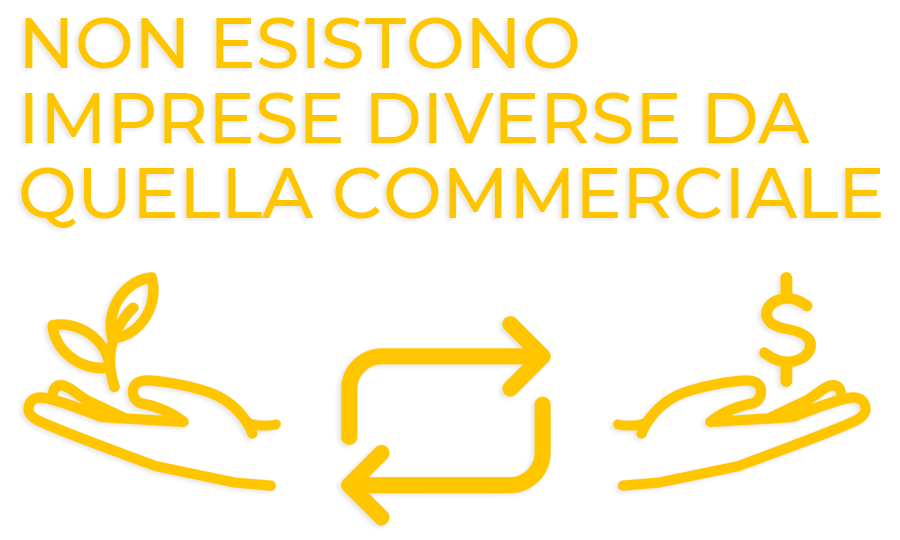
<style>
.page{position:relative;width:900px;height:540px;background:#ffffff}
.page>*{position:absolute;margin:0}
.t1{font:70px/75px "Montserrat-Medium";color:#ffc600}
</style>
<div class="page">
<p class="t1" style="left:21px;top:17px;width:860px;height:211px">NON ESISTONO IMPRESE DIVERSE DA QUELLA COMMERCIALE</p>
</div>
